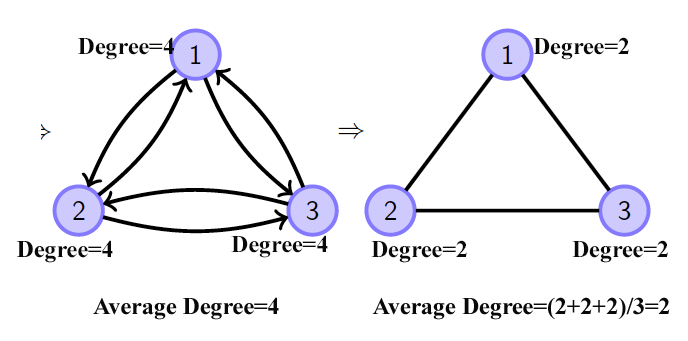
<style>
.page{position:relative;width:688px;height:341px;background:#ffffff}
.page>*{position:absolute;margin:0}
.t1{font:24px "TimesNewRomanPS-BoldMT";color:#090909}
</style>
<div class="page">
<p class="t1" style="left:78px;top:37px;width:96px;height:23px">Degree=4</p>
<p class="t1" style="left:533px;top:37px;width:96px;height:23px">Degree=2</p>
<p class="t1" style="left:17px;top:240px;width:96px;height:23px">Degree=4</p>
<p class="t1" style="left:231px;top:235px;width:97px;height:23px">Degree=4</p>
<p class="t1" style="left:371px;top:240px;width:96px;height:23px">Degree=2</p>
<p class="t1" style="left:572px;top:240px;width:96px;height:23px">Degree=2</p>
<p class="t1" style="left:93px;top:297px;width:186px;height:23px">Average Degree=4</p>
<p class="t1" style="left:372px;top:297px;width:298px;height:23px">Average Degree=(2+2+2)/3=2</p>
</div>
